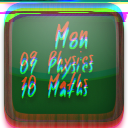
<style>
.page{position:relative;width:128px;height:128px}
.page>*{position:absolute;margin:0}
.t1{font:20px "GoodFoot";font-weight:bold}
.t2{font:18px "GoodFoot";font-weight:bold}
.t3{font:24px "GoodFoot";font-weight:bold}
</style>
<div class="page">
<p class="t1" style="left:19px;top:19px;width:75px;height:70px;rotate:-3deg"><span class="t2"> </span><span class="t3">Mon<br></span>09 Physics<br>10 Maths</p>
</div>
